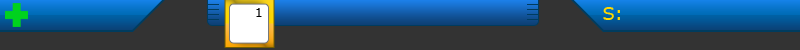
<style>
.page{position:relative;width:800px;height:50px;background:#333333}
.page>*{position:absolute;margin:0}
.t1{font:12px "Verdana";color:#000000}
.t2{font:18px "Verdana";color:#ffd800}
</style>
<div class="page">
<p class="t1" style="left:256px;top:8px;width:6px;height:9px">1</p>
<p class="t2" style="left:603px;top:7px;width:17px;height:13px">S:</p>
</div>
